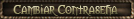
<style>
.page{position:relative;width:134px;height:19px}
.page>*{position:absolute;margin:0}
.t1{font:12px "Morpheus"}
</style>
<div class="page">
<p class="t1" style="left:13px;top:4px;width:105px;height:12px">Cambiar Contraseña</p>
</div>
